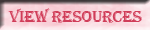
<style>
.page{position:relative;width:150px;height:30px}
.page>*{position:absolute;margin:0}
.t1{font:16px "Algerian";letter-spacing:-0.025em;color:#d03d59;scale:1.08 1}
</style>
<div class="page">
<p class="t1" style="left:8px;top:8px;width:134px;height:15px">VIEW RESOURCES</p>
</div>
